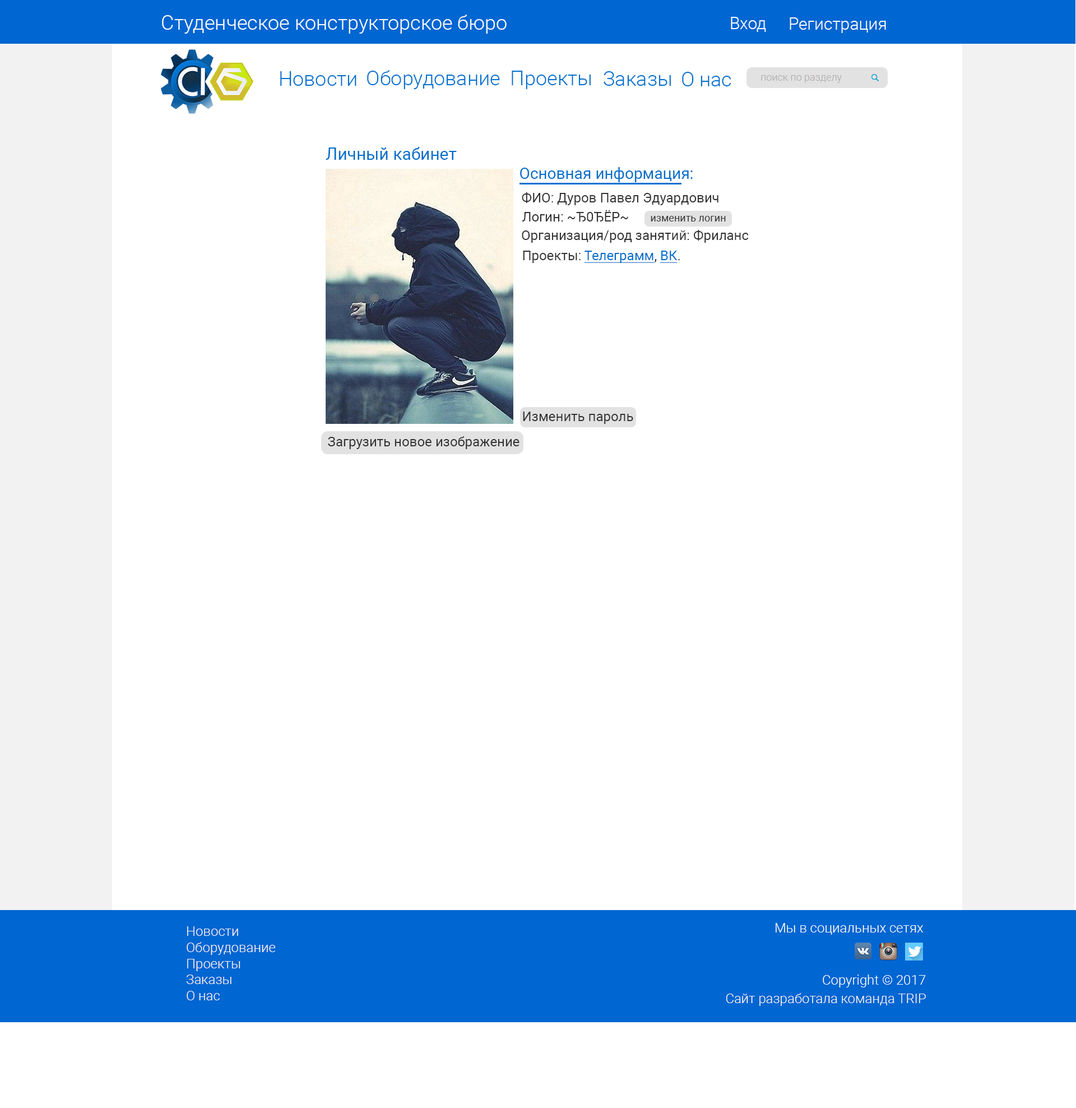
<style>
.page{position:relative;width:1076px;height:1108px;background:#ffffff}
.page>*{position:absolute;margin:0}
.t1{font:20.2px "Roboto-Light";color:#f8fdff}
.t2{font:16.8px "Roboto-Light";color:#f8fdff}
.t3{font:20.2px "Roboto-Light";color:#0171d0}
.t4{font:10.1px "Roboto-Light";color:#b3adad}
.t5{font:16.8px "Roboto-Regular";color:#006dc9}
.t6{font:15.7px "Roboto-Regular";color:#006dc9}
.t7{font:13.5px "Roboto-Regular";color:#333333}
.t8{font:10.1px "Roboto-Regular";color:#333333}
.t9{font:13.5px "Roboto-Regular";color:#006dc9;text-decoration:underline}
.t10{font:13.5px "Roboto-Regular";color:#0171d0;text-decoration:underline}
.t11{font:13.5px "Roboto-Light";color:#f8f3f3}
.t12{font:13.5px "Roboto-Light";color:#f8fdff}
</style>
<div class="page">
<p class="t1" style="left:162px;top:15px;width:345px;height:19px">Студенческое конструкторское бюро</p>
<p class="t2" style="left:731px;top:17px;width:35px;height:15px">Вход</p>
<p class="t2" style="left:790px;top:17px;width:96px;height:16px">Регистрация</p>
<p class="t3" style="left:280px;top:71px;width:77px;height:15px">Новости</p>
<p class="t3" style="left:367px;top:70px;width:133px;height:19px">Оборудование</p>
<p class="t3" style="left:512px;top:71px;width:79px;height:18px">Проекты</p>
<p class="t3" style="left:604px;top:71px;width:67px;height:15px">Заказы</p>
<p class="t3" style="left:682px;top:72px;width:50px;height:14px">О нас</p>
<p class="t4" style="left:761px;top:75px;width:81px;height:8px">поиск по разделу</p>
<p class="t5" style="left:326px;top:147px;width:131px;height:13px">Личный кабинет</p>
<p class="t6" style="left:520px;top:167px;width:173px;height:15px">Основная информация:</p>
<p class="t7" style="left:522px;top:192px;width:197px;height:13px">ФИО: Дуров Павел Эдуардович</p>
<p class="t7" style="left:523px;top:210px;width:105px;height:12px">Логин: ~Ђ0ЂЁP~</p>
<p class="t8" style="left:651px;top:216px;width:75px;height:5px">изменить логин</p>
<p class="t7" style="left:522px;top:230px;width:227px;height:13px">Организация/род занятий: Фриланс</p>
<p class="t9" style="left:523px;top:251px;width:157px;height:12px"><span class="t7">Проекты: </span>Телеграмм<span class="t7">, </span><span class="t10">ВК</span><span class="t7">.</span></p>
<p class="t7" style="left:523px;top:411px;width:111px;height:13px">Изменить пароль</p>
<p class="t7" style="left:328px;top:436px;width:192px;height:13px">Загрузить новое изображение</p>
<p class="t11" style="left:187px;top:926px;width:89px;height:74px">Новости<br>Оборудование<br>Проекты<br>Заказы<br>О нас</p>
<p class="t12" style="left:776px;top:923px;width:148px;height:12px">Мы в социальных сетях</p>
<p class="t12" style="left:823px;top:974px;width:103px;height:13px">Copyright © 2017</p>
<p class="t11" style="left:726px;top:993px;width:200px;height:13px">Сайт разработала команда TRIP</p>
</div>
